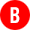
<style>
.page{position:relative;width:30px;height:30px;background:#ff0000}
.page>*{position:absolute;margin:0}
.t1{font:22px "HelveticaNeue-BoldCond";letter-spacing:-0.015em;color:#ffffff;scale:0.85 1}
</style>
<div class="page">
<p class="t1" style="left:10px;top:7px;width:10px;height:16px">B</p>
</div>
